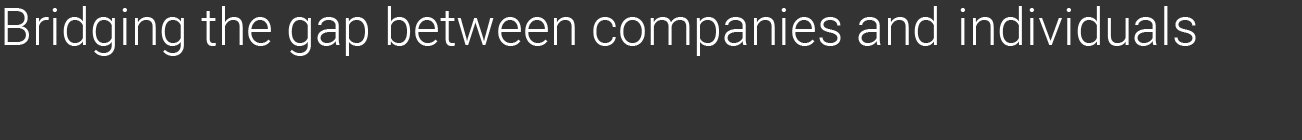
<style>
.page{position:relative;width:1302px;height:140px;background:#333333}
.page>*{position:absolute;margin:0}
.t1{font:52.1px "Roboto-Light";color:#ffffff}
</style>
<div class="page">
<p class="t1" style="left:4px;top:6px;width:933px;height:50px">Bridging the gap between companies and</p>
<p class="t1" style="left:960px;top:6px;width:236px;height:40px">individuals</p>
</div>
